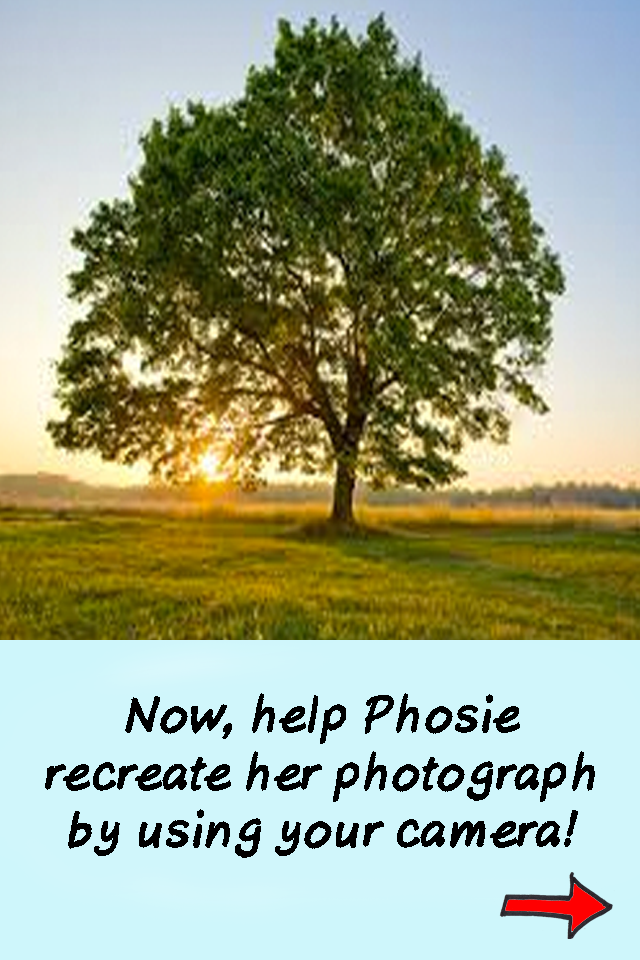
<style>
.page{position:relative;width:640px;height:960px}
.page>*{position:absolute;margin:0}
.t1{font:48px "AxureHandwriting-BoldItalic";color:#000000}
</style>
<div class="page">
<p class="t1" style="left:45px;top:693px;width:550px;height:165px;text-align:center">Now, help Phosie<br>recreate her photograph<br>by using your camera!</p>
</div>
